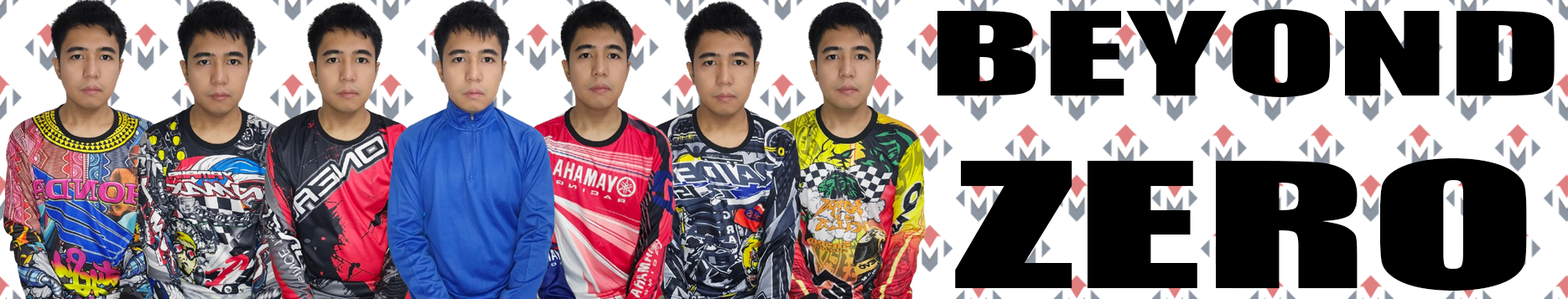
<style>
.page{position:relative;width:1568px;height:299px;background:#ffffff}
.page>*{position:absolute;margin:0}
.t1{font:107.5px "Impact";color:#000000;scale:1.91 1}
.t2{font:161.2px "Impact";color:#000000;scale:1.91 1}
</style>
<div class="page">
<p class="t1" style="left:937px;top:9px;width:618px;height:282px;text-align:center">BEYOND<br><span class="t2">ZERO</span></p>
</div>
